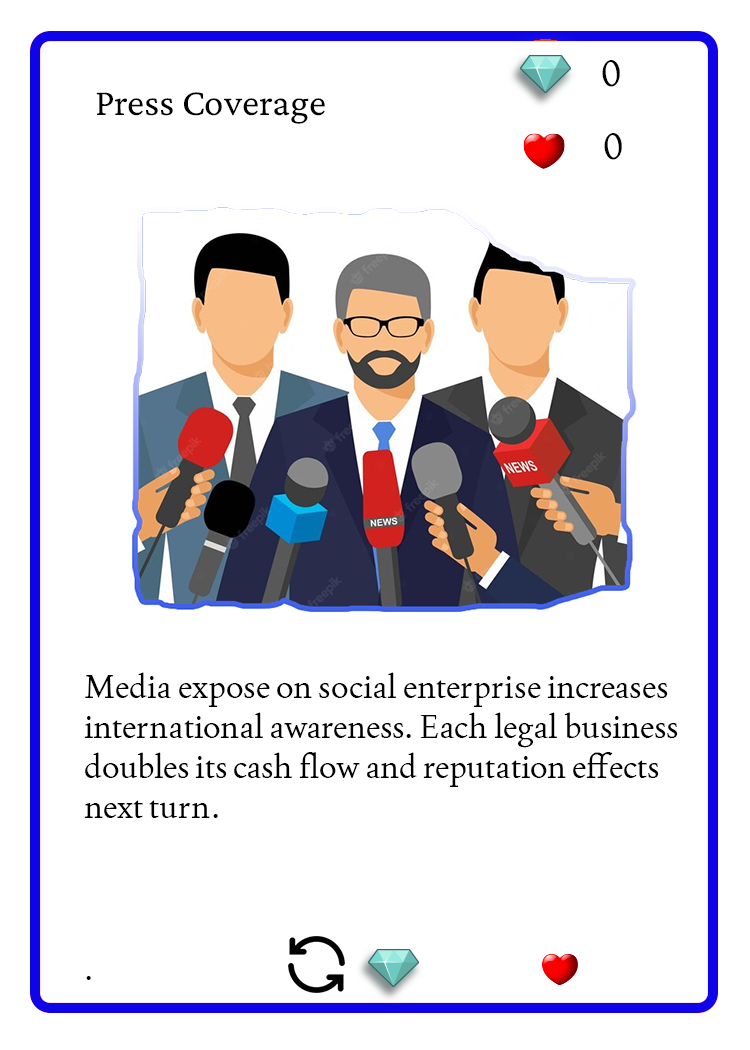
<style>
.page{position:relative;width:750px;height:1050px;background:#ffffff}
.page>*{position:absolute;margin:0}
.t1{font:37.5px "Joan-Regular";color:#000000;text-transform:uppercase}
.t2{font:38.9px "CrimsonPro-Regular";color:#000000}
.t3{font:33.3px "Joan-Regular";color:#000000}
</style>
<div class="page">
<p class="t1" style="left:602px;top:60px;width:18px;height:27px">0</p>
<p class="t2" style="left:96px;top:92px;width:229px;height:32px">Press Coverage</p>
<p class="t1" style="left:604px;top:133px;width:18px;height:27px">0</p>
<p class="t3" style="left:84px;top:672px;width:594px;height:146px">Media expose on social enterprise increases international awareness. Each legal business doubles its cash flow and reputation effects next turn.</p>
<p class="t3" style="left:86px;top:976px;width:5px;height:4px">.</p>
</div>
